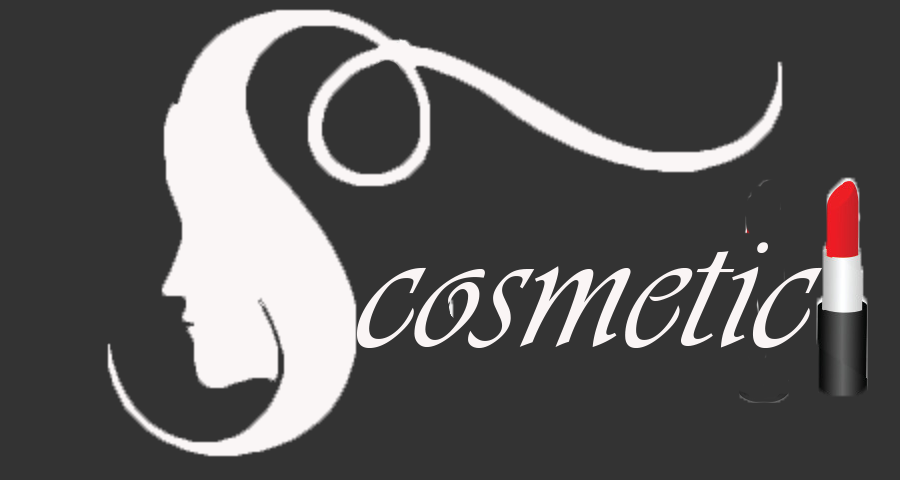
<style>
.page{position:relative;width:900px;height:480px;background:#333333}
.page>*{position:absolute;margin:0}
.t1{font:192px "Vivaldii";color:#faf5f5}
</style>
<div class="page">
<p class="t1" style="left:356px;top:242px;width:466px;height:106px">cosmetic</p>
</div>
